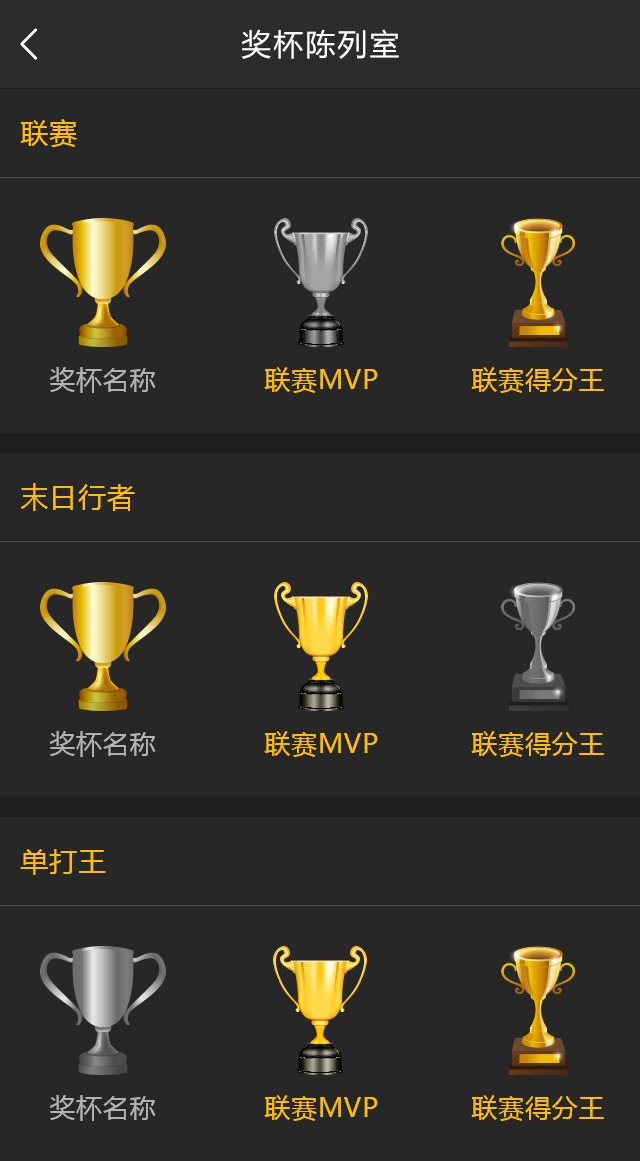
<style>
.page{position:relative;width:640px;height:1161px;background:#272727}
.page>*{position:absolute;margin:0}
.t1{font:30px "MicrosoftYaHei";letter-spacing:0.07em;color:#ffffff}
.t2{font:28px "MicrosoftYaHei";letter-spacing:0.03em;color:#fdbd06}
.t3{font:26px "MicrosoftYaHei";letter-spacing:0.03em;color:#b2b2b2}
.t4{font:26px "MicrosoftYaHei";letter-spacing:0.03em;color:#fdbd06}
</style>
<div class="page">
<p class="t1" style="left:241px;top:29px;width:158px;height:30px">奖杯陈列室</p>
<p class="t2" style="left:20px;top:119px;width:57px;height:28px">联赛</p>
<p class="t3" style="left:50px;top:367px;width:106px;height:26px">奖杯名称</p>
<p class="t4" style="left:264px;top:367px;width:114px;height:26px">联赛MVP</p>
<p class="t4" style="left:471px;top:367px;width:133px;height:26px">联赛得分王</p>
<p class="t2" style="left:20px;top:483px;width:115px;height:28px">末日行者</p>
<p class="t3" style="left:50px;top:731px;width:106px;height:26px">奖杯名称</p>
<p class="t4" style="left:264px;top:731px;width:114px;height:26px">联赛MVP</p>
<p class="t4" style="left:471px;top:731px;width:133px;height:26px">联赛得分王</p>
<p class="t2" style="left:20px;top:849px;width:86px;height:26px">单打王</p>
<p class="t3" style="left:50px;top:1095px;width:106px;height:26px">奖杯名称</p>
<p class="t4" style="left:264px;top:1095px;width:114px;height:26px">联赛MVP</p>
<p class="t4" style="left:471px;top:1095px;width:133px;height:26px">联赛得分王</p>
</div>
